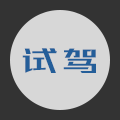
<style>
.page{position:relative;width:120px;height:120px;background:#d7d7d7}
.page>*{position:absolute;margin:0}
.t1{font:40px "huxiaobo-gdh";color:#245e99}
</style>
<div class="page">
<p class="t1" style="left:22px;top:48px;width:74px;height:25px">试驾</p>
</div>
